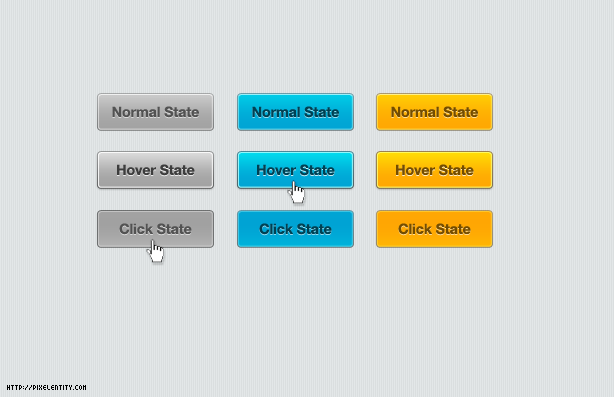
<style>
.page{position:relative;width:614px;height:397px;background:#dadedf}
.page>*{position:absolute;margin:0}
.t1{font:14px "HelveticaNeue-Bold";color:#525252}
.t2{font:14px "HelveticaNeue-Bold";color:#004153}
.t3{font:14px "HelveticaNeue-Bold";color:#744d01}
.t4{font:14px "HelveticaNeue-Bold";color:#3d3d3d}
.t5{font:8px "04b24";color:#000000}
</style>
<div class="page">
<p class="t1" style="left:112px;top:106px;width:87px;height:12px">Normal State</p>
<p class="t2" style="left:252px;top:106px;width:87px;height:12px">Normal State</p>
<p class="t3" style="left:391px;top:106px;width:87px;height:12px">Normal State</p>
<p class="t4" style="left:117px;top:164px;width:78px;height:12px">Hover State</p>
<p class="t2" style="left:257px;top:164px;width:78px;height:12px">Hover State</p>
<p class="t3" style="left:396px;top:164px;width:78px;height:12px">Hover State</p>
<p class="t1" style="left:119px;top:223px;width:73px;height:12px">Click State</p>
<p class="t2" style="left:259px;top:223px;width:73px;height:12px">Click State</p>
<p class="t3" style="left:398px;top:223px;width:73px;height:12px">Click State</p>
<p class="t5" style="left:7px;top:385px;width:79px;height:5px">http://pixelentity.com</p>
</div>
